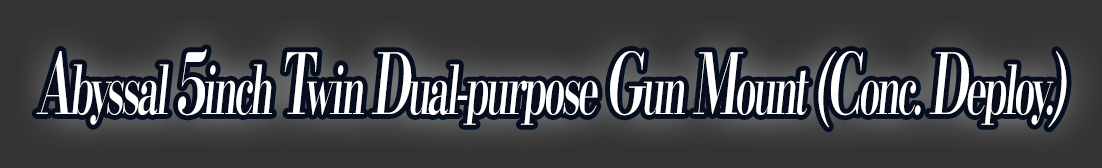
<style>
.page{position:relative;width:1102px;height:168px;background:#333333}
.page>*{position:absolute;margin:0}
.t1{font:67.2px "KochoStd-Heavy";letter-spacing:-0.08em;color:#ffffff;font-style:italic;scale:0.57 1}
.t2{font:84px "KochoStd-Heavy";letter-spacing:-0.08em;color:#ffffff;font-style:italic;scale:0.57 1}
</style>
<div class="page">
<p class="t1" style="left:36px;top:49px;width:1031px;height:79px"><span class="t2">A</span>byssal <span class="t2">5</span>inch <span class="t2">T</span>win <span class="t2">D</span>ual-purpose <span class="t2">G</span>un <span class="t2">M</span>ount <span class="t2">(C</span>onc. <span class="t2">D</span>eploy.<span class="t2">)</span></p>
</div>
